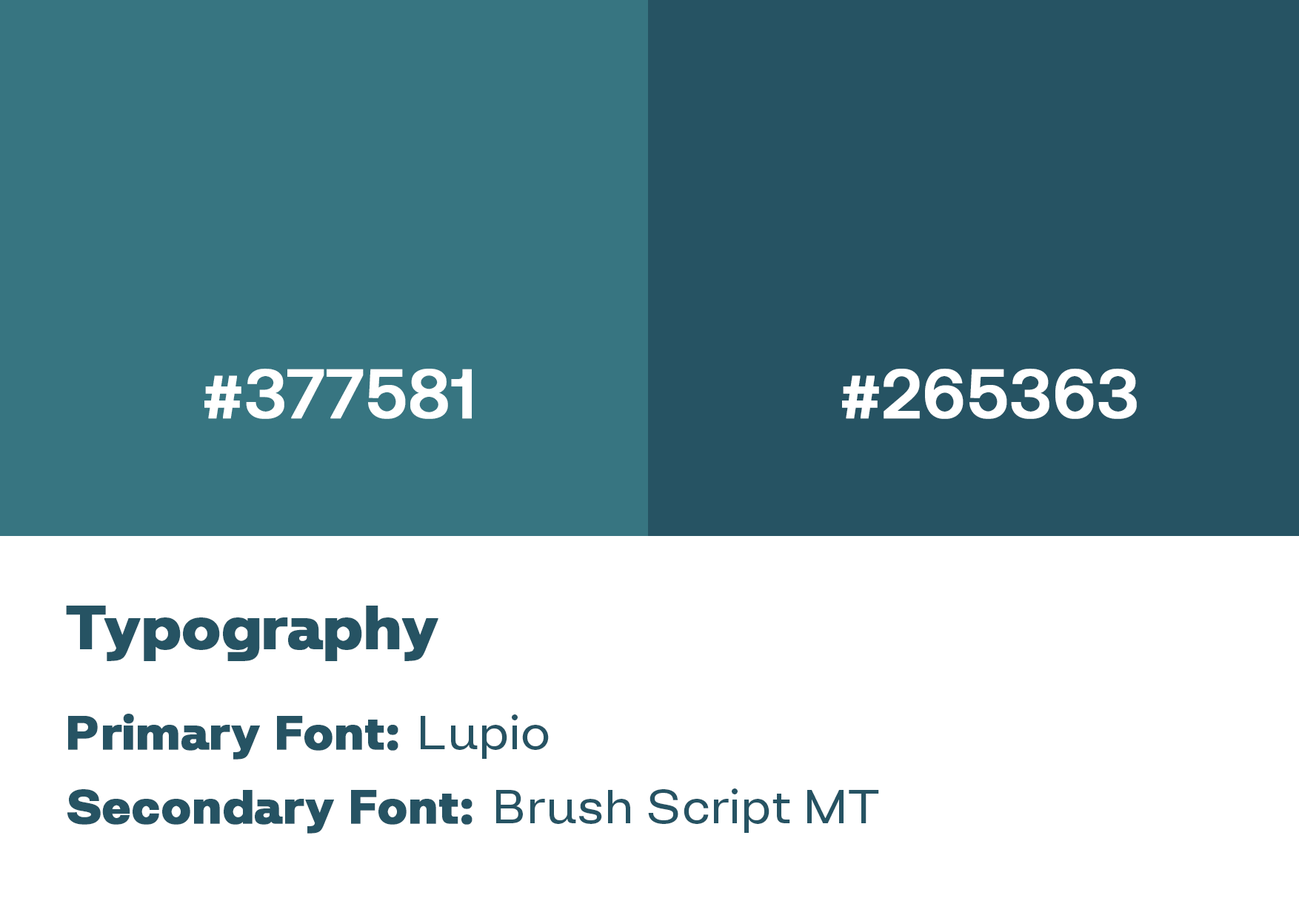
<style>
.page{position:relative;width:1299px;height:918px;background:#ffffff}
.page>*{position:absolute;margin:0}
.t1{font:69.1px "Aeonik-Medium";color:#ffffff;font-weight:bold}
.t2{font:60.9px "FONTSPRINGDEMO-LupioBold";color:#265363;font-weight:bold}
.t3{font:47.9px "FONTSPRINGDEMO-LupioBold";color:#265363;font-weight:bold}
.t4{font:47.9px "FONTSPRINGDEMO-LupioRegular";color:#265363}
</style>
<div class="page">
<p class="t1" style="left:204px;top:369px;width:268px;height:50px">#377581</p>
<p class="t1" style="left:842px;top:369px;width:295px;height:50px">#265363</p>
<p class="t2" style="left:66px;top:606px;width:372px;height:55px">Typography</p>
<p class="t3" style="left:68px;top:714px;width:330px;height:46px">Primary Font:</p>
<p class="t4" style="left:421px;top:715px;width:128px;height:44px">Lupio</p>
<p class="t3" style="left:67px;top:789px;width:405px;height:45px">Secondary Font:</p>
<p class="t4" style="left:496px;top:789px;width:383px;height:44px">Brush Script MT</p>
</div>
